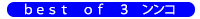
<style>
.page{position:relative;width:200px;height:19px;background:#0000ff}
.page>*{position:absolute;margin:0}
.t1{font:12.5px "KozGoPr6N-Regular";letter-spacing:-0.04em;color:#ffffff}
</style>
<div class="page">
<p class="t1" style="left:25px;top:3px;width:150px;height:12px">ｂｅｓｔ　ｏｆ　３　ンンコ</p>
</div>
